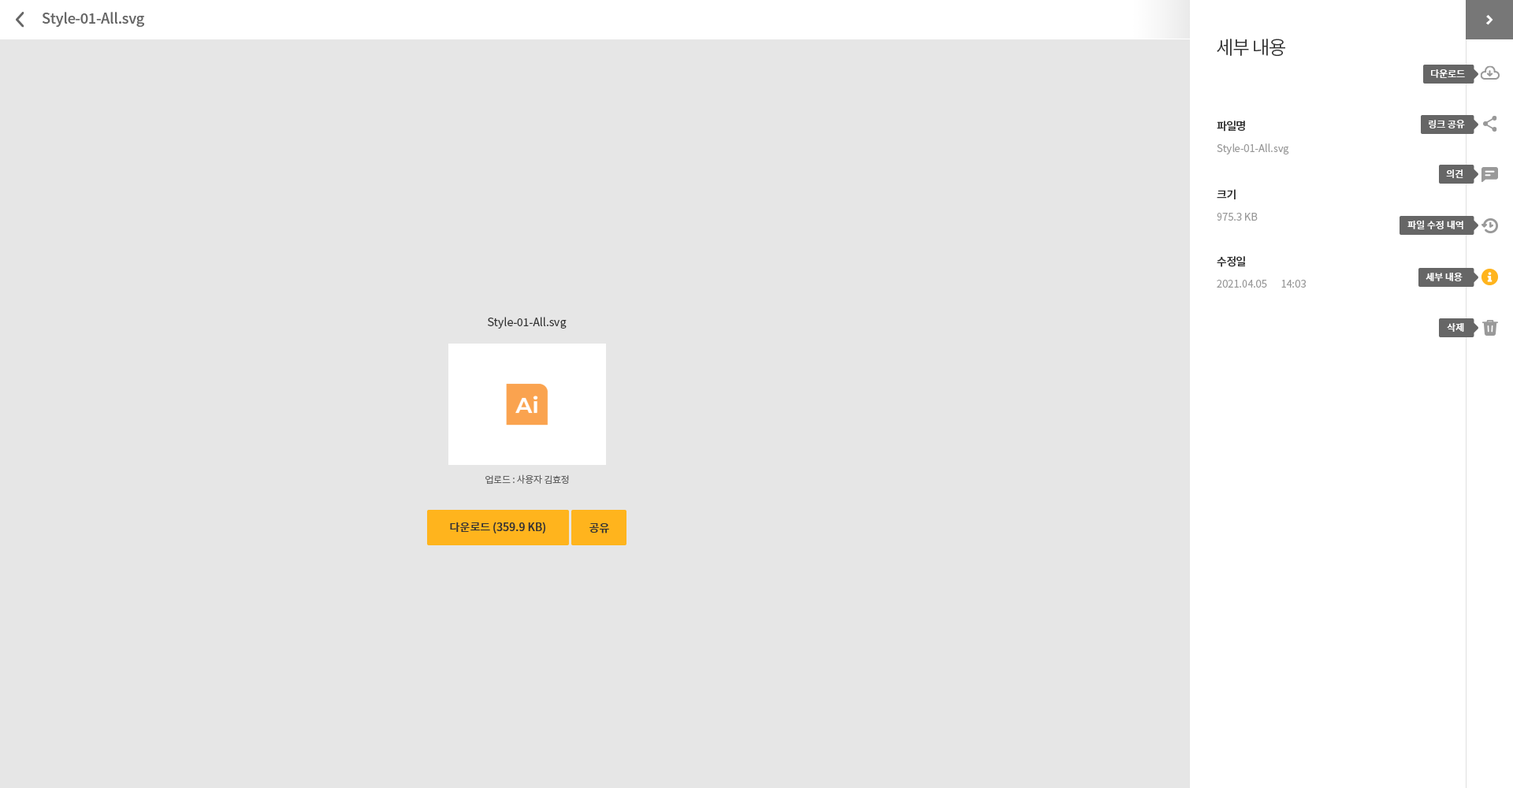
<style>
.page{position:relative;width:1513px;height:788px;background:#e6e6e6}
.page>*{position:absolute;margin:0}
.t1{font:14.2px "NotoSansCJKkr-Medium";letter-spacing:-0.01em;color:#666666}
.t2{font:18.9px "NotoSansCJKkr-DemiLight";letter-spacing:-0.05em;color:#333333}
.t3{font:9.5px "NotoSansCJKkr-Medium";color:#ffffff}
.t4{font:11px "NotoSansCJKkr-Bold";letter-spacing:-0.05em;color:#333333}
.t5{font:10.2px "NotoSansCJKkr-DemiLight";color:#999999}
.t6{font:11px "NotoSansCJKkr-Regular";color:#333333}
.t7{font:9.5px "NotoSansCJKkr-Regular";letter-spacing:-0.025em;color:#666666}
.t8{font:11px "NotoSansCJKkr-Medium";color:#333333}
</style>
<div class="page">
<p class="t1" style="left:43px;top:12px;width:101px;height:15px">Style-01-All.svg</p>
<p class="t2" style="left:1217px;top:39px;width:68px;height:17px">세부 내용</p>
<p class="t3" style="left:1431px;top:69px;width:34px;height:9px">다운로드</p>
<p class="t4" style="left:1217px;top:121px;width:28px;height:11px">파일명</p>
<p class="t3" style="left:1429px;top:120px;width:36px;height:8px">링크 공유</p>
<p class="t5" style="left:1217px;top:143px;width:72px;height:11px">Style-01-All.svg</p>
<p class="t3" style="left:1446px;top:169px;width:17px;height:9px">의견</p>
<p class="t4" style="left:1217px;top:189px;width:19px;height:10px">크기</p>
<p class="t5" style="left:1217px;top:213px;width:41px;height:8px">975.3 KB</p>
<p class="t3" style="left:1407px;top:220px;width:56px;height:9px">파일 수정 내역</p>
<p class="t4" style="left:1217px;top:256px;width:28px;height:11px">수정일</p>
<p class="t5" style="left:1217px;top:280px;width:89px;height:8px">2021.04.05      14:03</p>
<p class="t3" style="left:1426px;top:273px;width:37px;height:8px">세부 내용</p>
<p class="t6" style="left:488px;top:317px;width:79px;height:12px">Style-01-All.svg</p>
<p class="t3" style="left:1447px;top:323px;width:17px;height:9px">삭제</p>
<p class="t7" style="left:485px;top:474px;width:84px;height:10px">업로드 : 사용자 김효정</p>
<p class="t8" style="left:450px;top:522px;width:95px;height:12px">다운로드 (359.9 KB)</p>
<p class="t8" style="left:589px;top:523px;width:20px;height:11px">공유</p>
</div>
